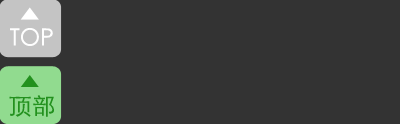
<style>
.page{position:relative;width:400px;height:124px;background:#333333}
.page>*{position:absolute;margin:0}
.t1{font:23.6px "STXihei";color:#ffffff}
.t2{font:23.6px "STXihei";color:#23911e}
</style>
<div class="page">
<p class="t1" style="left:10px;top:28px;width:43px;height:18px">TOP</p>
<p class="t2" style="left:9px;top:95px;width:45px;height:22px">顶部</p>
</div>
